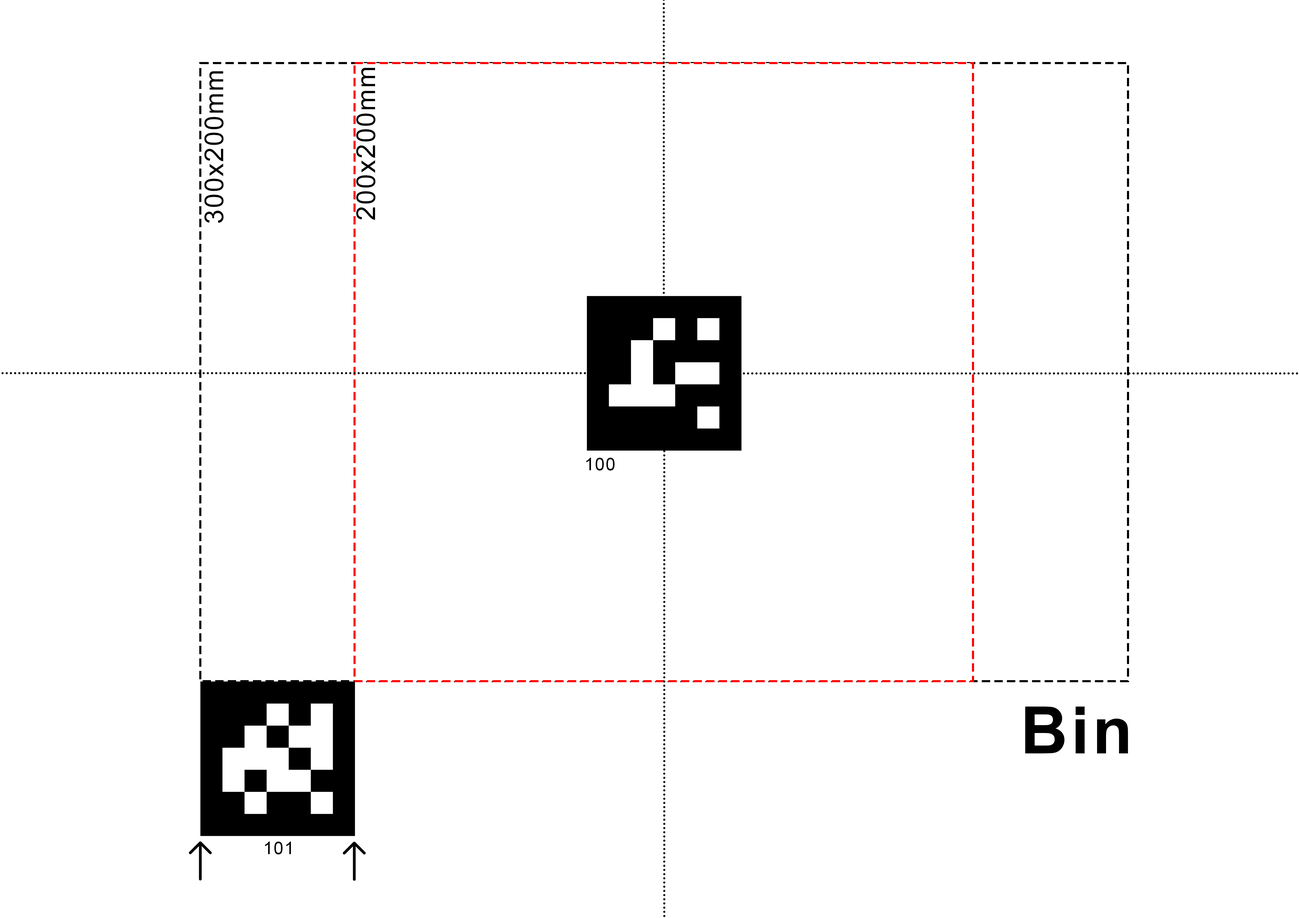
<style>
.page{position:relative;width:1299px;height:918px;background:#ffffff}
.page>*{position:absolute;margin:0}
.t1{font:26.2px "ArialMT";letter-spacing:0.05em;color:#000000}
.t2{font:17.5px "ArialMT";letter-spacing:0.05em;color:#000000}
.t3{font:65.4px "Arial-BoldMT";letter-spacing:0.05em;color:#000000}
</style>
<div class="page">
<p class="t1" style="left:204px;top:71px;width:20px;height:152px;rotate:-90deg">300x200mm</p>
<p class="t1" style="left:356px;top:68px;width:19px;height:152px;rotate:-90deg">200x200mm</p>
<p class="t2" style="left:586px;top:458px;width:28px;height:13px">100</p>
<p class="t3" style="left:1025px;top:707px;width:103px;height:47px">Bin</p>
<p class="t2" style="left:265px;top:842px;width:26px;height:13px">101</p>
</div>
